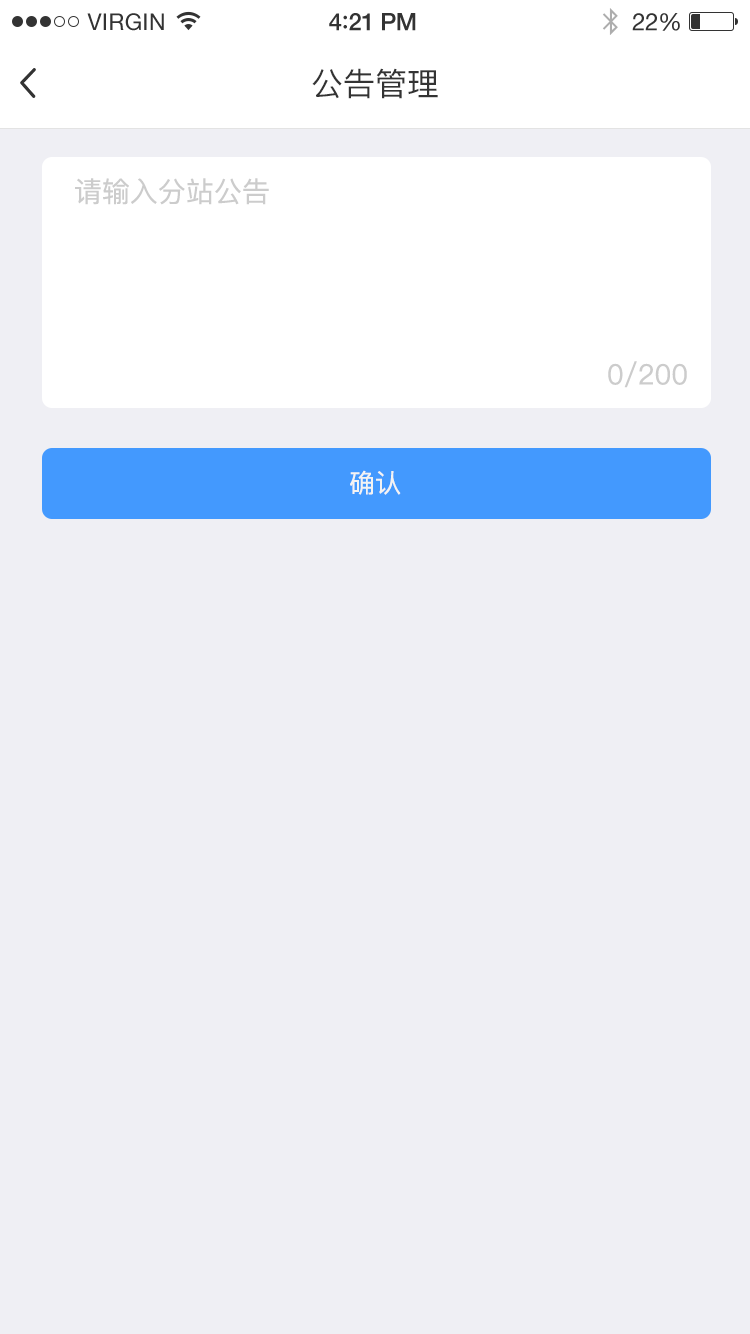
<style>
.page{position:relative;width:750px;height:1334px;background:#efeff4}
.page>*{position:absolute;margin:0}
.t1{font:32px "PingFangSC-Regular";color:#333333}
.t2{font:28px "PingFangSC-Regular";color:#cccccc}
.t3{font:26px "PingFangSC-Regular";color:#f3f3f3}
</style>
<div class="page">
<p class="t1" style="left:312px;top:68px;width:126px;height:31px">公告管理</p>
<p class="t2" style="left:75px;top:178px;width:194px;height:27px">请输入分站公告</p>
<p class="t2" style="left:608px;top:361px;width:79px;height:27px">0/200</p>
<p class="t3" style="left:350px;top:470px;width:51px;height:25px">确认</p>
</div>
